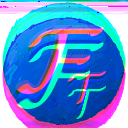
<style>
.page{position:relative;width:128px;height:128px}
.page>*{position:absolute;margin:0}
.t1{font:96px "Cmbsy10"}
.t2{font:42px "Cmbsy10"}
</style>
<div class="page">
<p class="t1" style="left:15px;top:23px;width:89px;height:69px">F</p>
<p class="t2" style="left:67px;top:68px;width:39px;height:34px">T</p>
</div>
